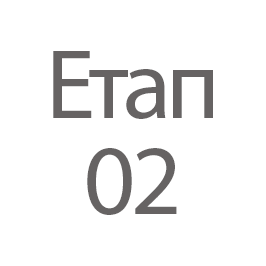
<style>
.page{position:relative;width:266px;height:266px;background:#ffffff}
.page>*{position:absolute;margin:0}
.t1{font:100px/31.8px "MyriadPro-Regular";letter-spacing:-0.05em;color:#666363}
</style>
<div class="page">
<p class="t1" style="left:53px;top:51px;width:160px;height:164px;text-align:center">Етап<br><br><br>02</p>
</div>
